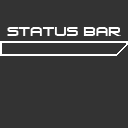
<style>
.page{position:relative;width:128px;height:128px;background:#333333}
.page>*{position:absolute;margin:0}
.t1{font:12px "VenusRising";color:#ffffff}
</style>
<div class="page">
<p class="t1" style="left:7px;top:27px;width:114px;height:9px">Status Bar</p>
</div>
